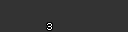
<style>
.page{position:relative;width:128px;height:32px;background:#333333}
.page>*{position:absolute;margin:0}
.t1{font:10px "Terminal";color:#ffffff}
</style>
<div class="page">
<p class="t1" style="left:47px;top:23px;width:5px;height:7px">3</p>
</div>
